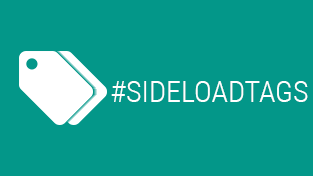
<style>
.page{position:relative;width:313px;height:176px;background:#039789}
.page>*{position:absolute;margin:0}
.t1{font:30px "RobotoCondensed-Light";color:#ffffff}
</style>
<div class="page">
<p class="t1" style="left:111px;top:81px;width:197px;height:21px">#SIDELOADTAGS</p>
</div>
